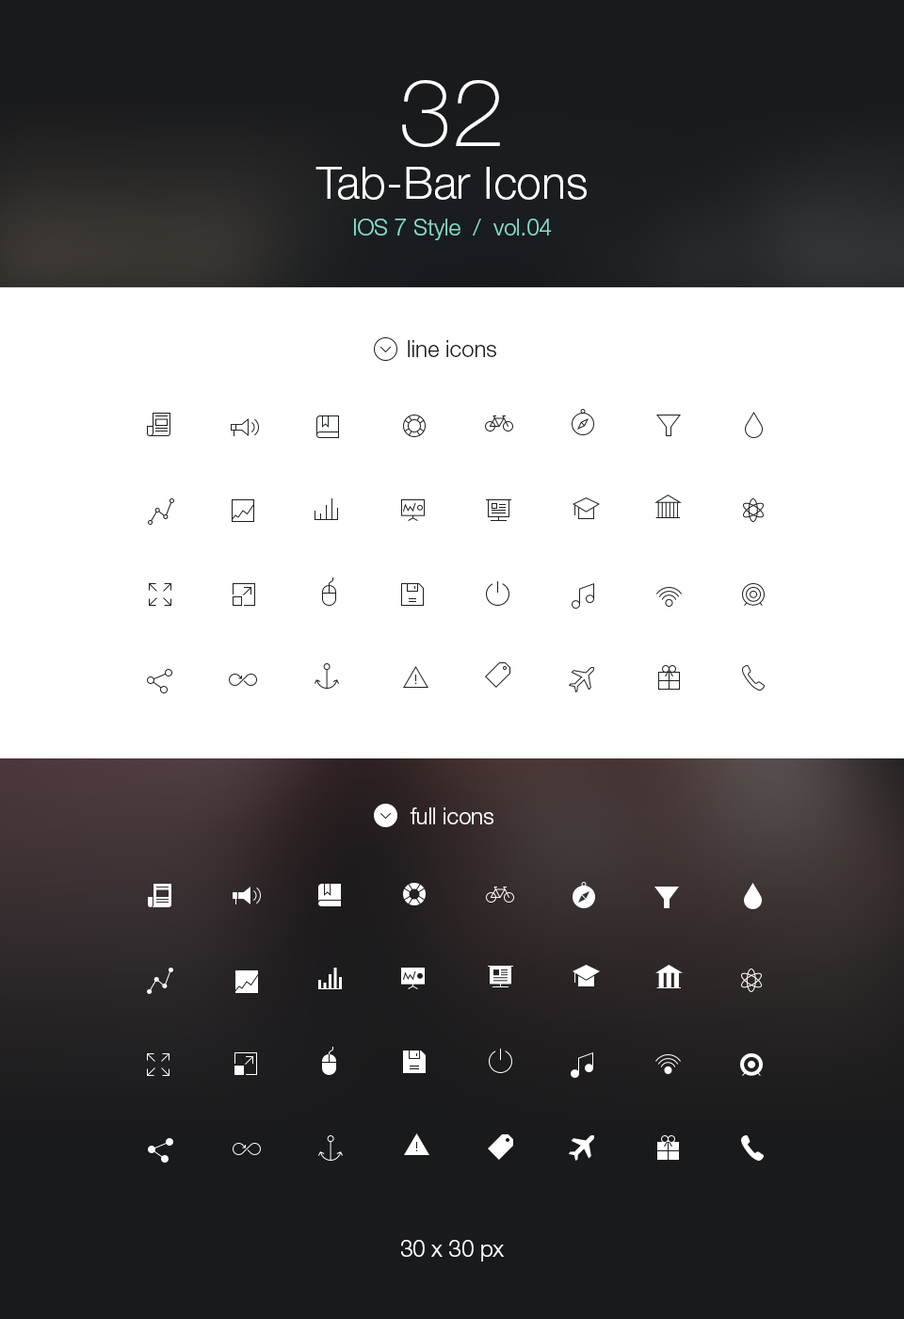
<style>
.page{position:relative;width:904px;height:1319px;background:#ffffff}
.page>*{position:absolute;margin:0}
.t1{font:22.6px/36.7px "HelveticaNeueLTStd-Lt";color:#85dac7}
.t2{font:94.2px/47.1px "HelveticaNeueLTStd-Th";color:#ffffff}
.t3{font:45.2px/52.7px "HelveticaNeueLTStd-Lt";color:#ffffff}
.t4{font:22.6px "HelveticaNeueLTStd-Lt";color:#1c2021}
.t5{font:22.6px "HelveticaNeueLTStd-Lt";color:#ffffff}
</style>
<div class="page">
<p class="t1" style="left:316px;top:80px;width:271px;height:160px;text-align:center"><span class="t2">32<br></span><span class="t3">Tab-Bar Icons<br></span>IOS 7 Style  /  vol.04</p>
<p class="t4" style="left:408px;top:340px;width:88px;height:17px">line icons</p>
<p class="t5" style="left:410px;top:807px;width:84px;height:17px">full icons</p>
<p class="t5" style="left:401px;top:1240px;width:103px;height:21px">30 x 30 px</p>
</div>
